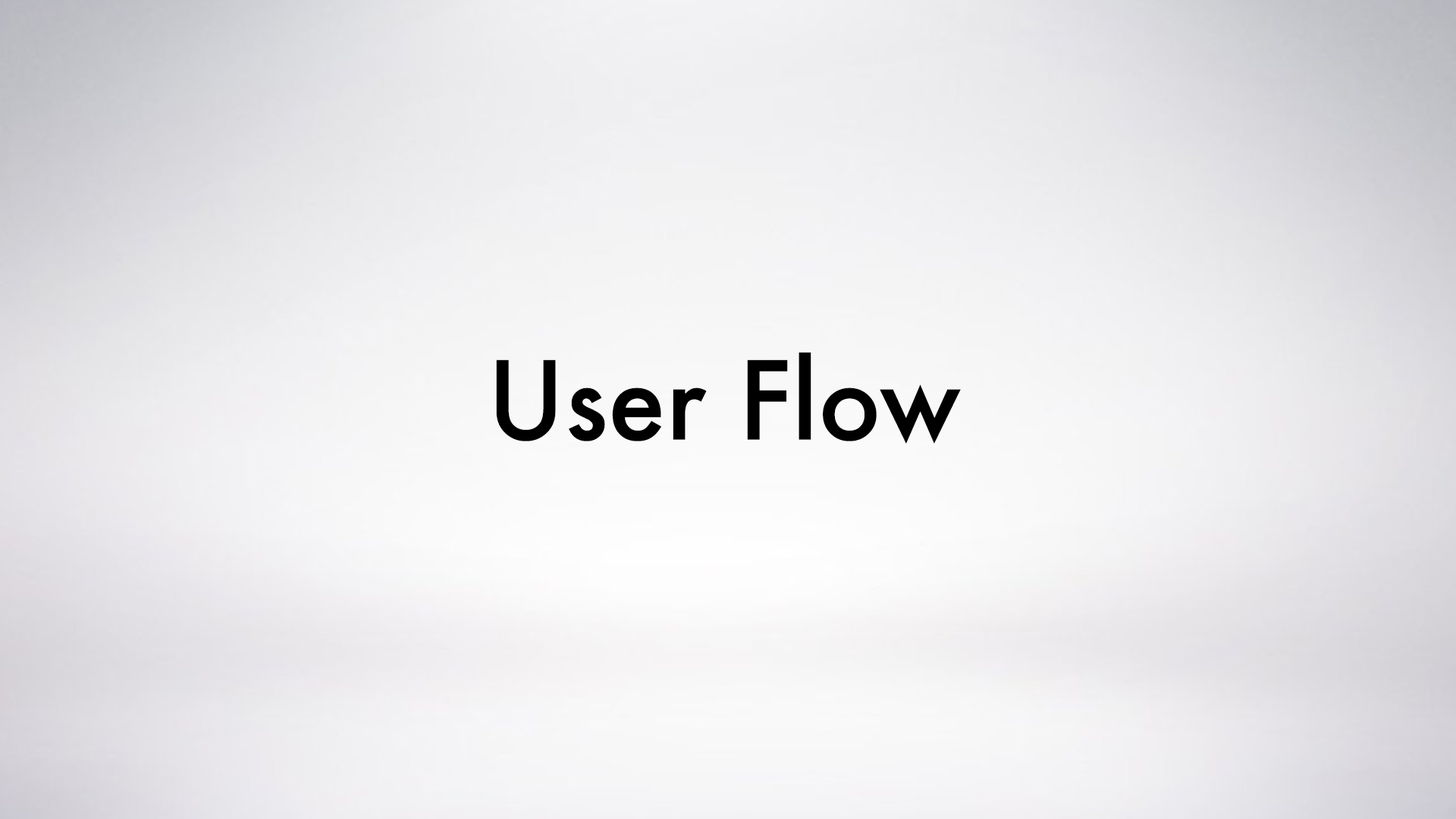
<style>
.page{position:relative;width:1456px;height:819px}
.page>*{position:absolute;margin:0}
.t1{font:105.5px "Futura-Medium";color:#000000}
</style>
<div class="page">
<p class="t1" style="left:496px;top:352px;width:465px;height:92px">User Flow</p>
</div>
